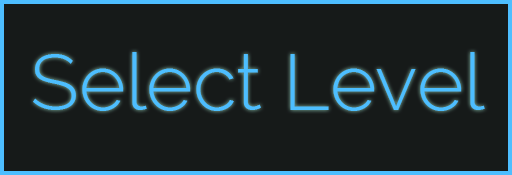
<style>
.page{position:relative;width:512px;height:175px;background:#161a19}
.page>*{position:absolute;margin:0}
.t1{font:80px "Raleway-Light";color:#4dbeff}
</style>
<div class="page">
<p class="t1" style="left:33px;top:52px;width:452px;height:59px">Select Level</p>
</div>
